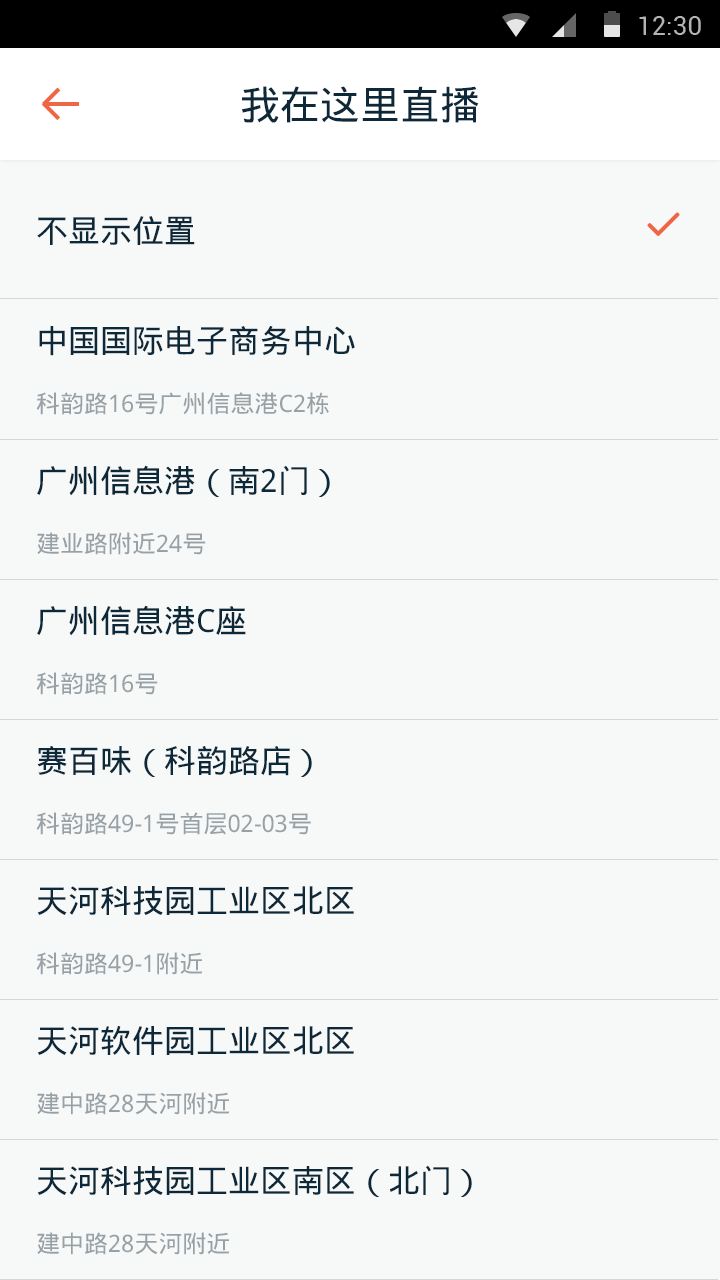
<style>
.page{position:relative;width:720px;height:1280px;background:#f7f8f8}
.page>*{position:absolute;margin:0}
.t1{font:40px "DroidSansFallback";color:#0c2839}
.t2{font:32px "DroidSansFallback";color:#0c2839}
.t3{font:24px "DroidSansFallback";color:#98a1a6}
</style>
<div class="page">
<p class="t1" style="left:242px;top:86px;width:237px;height:37px">我在这里直播</p>
<p class="t2" style="left:37px;top:216px;width:158px;height:29px">不显示位置</p>
<p class="t2" style="left:39px;top:326px;width:316px;height:30px">中国国际电子商务中心</p>
<p class="t3" style="left:36px;top:392px;width:293px;height:23px">科韵路16号广州信息港C2栋</p>
<p class="t2" style="left:37px;top:465px;width:293px;height:32px">广州信息港（南2门）</p>
<p class="t3" style="left:37px;top:532px;width:169px;height:23px">建业路附近24号</p>
<p class="t2" style="left:37px;top:605px;width:209px;height:31px">广州信息港C座</p>
<p class="t3" style="left:36px;top:672px;width:122px;height:23px">科韵路16号</p>
<p class="t2" style="left:37px;top:745px;width:275px;height:32px">赛百味（科韵路店）</p>
<p class="t3" style="left:36px;top:812px;width:275px;height:23px">科韵路49-1号首层02-03号</p>
<p class="t2" style="left:37px;top:886px;width:317px;height:29px">天河科技园工业区北区</p>
<p class="t3" style="left:36px;top:952px;width:167px;height:23px">科韵路49-1附近</p>
<p class="t2" style="left:37px;top:1026px;width:317px;height:29px">天河软件园工业区北区</p>
<p class="t3" style="left:37px;top:1092px;width:193px;height:23px">建中路28天河附近</p>
<p class="t2" style="left:37px;top:1165px;width:435px;height:32px">天河科技园工业区南区（北门）</p>
<p class="t3" style="left:37px;top:1232px;width:193px;height:23px">建中路28天河附近</p>
</div>
